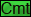
<style>
.page{position:relative;width:31px;height:17px}
.page>*{position:absolute;margin:0}
.t1{font:16px "Helvetica";color:#0f0c05}
</style>
<div class="page">
<p class="t1" style="left:1px;top:2px;width:29px;height:12px">Cmt</p>
</div>
